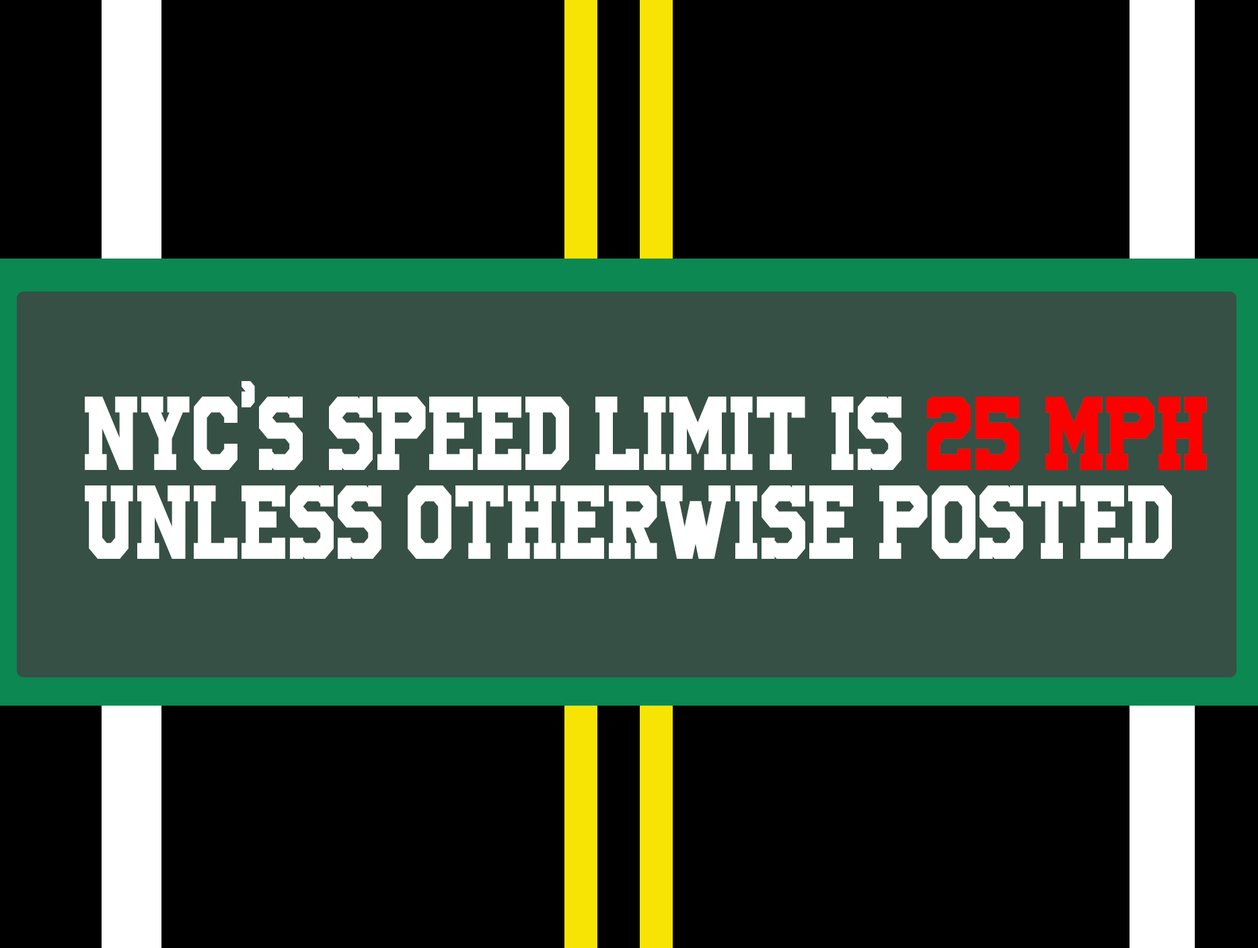
<style>
.page{position:relative;width:1258px;height:948px;background:#000000}
.page>*{position:absolute;margin:0}
.t1{font:73.4px "UniversityRegular";color:#ffffff;scale:0.83 1}
.t2{font:73.4px "UniversityRegular";color:#ff0000;scale:0.83 1}
</style>
<div class="page">
<p class="t1" style="left:85px;top:381px;width:1122px;height:178px">NYC’s speed limit is <span class="t2">25 mph<br></span>unless otherwise posted</p>
</div>
